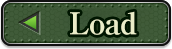
<style>
.page{position:relative;width:172px;height:49px}
.page>*{position:absolute;margin:0}
.t1{font:30px "RyuminPro-ExBold";letter-spacing:-0.04em;color:#eaedc8}
</style>
<div class="page">
<p class="t1" style="left:70px;top:11px;width:67px;height:24px">Load</p>
</div>
